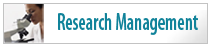
<style>
.page{position:relative;width:211px;height:47px;background:#ffffff}
.page>*{position:absolute;margin:0}
.t1{font:24px "MyriadPro-SemiboldCond";color:#11839a;scale:0.78 1}
</style>
<div class="page">
<p class="t1" style="left:58px;top:13px;width:140px;height:22px">Research Management</p>
</div>
